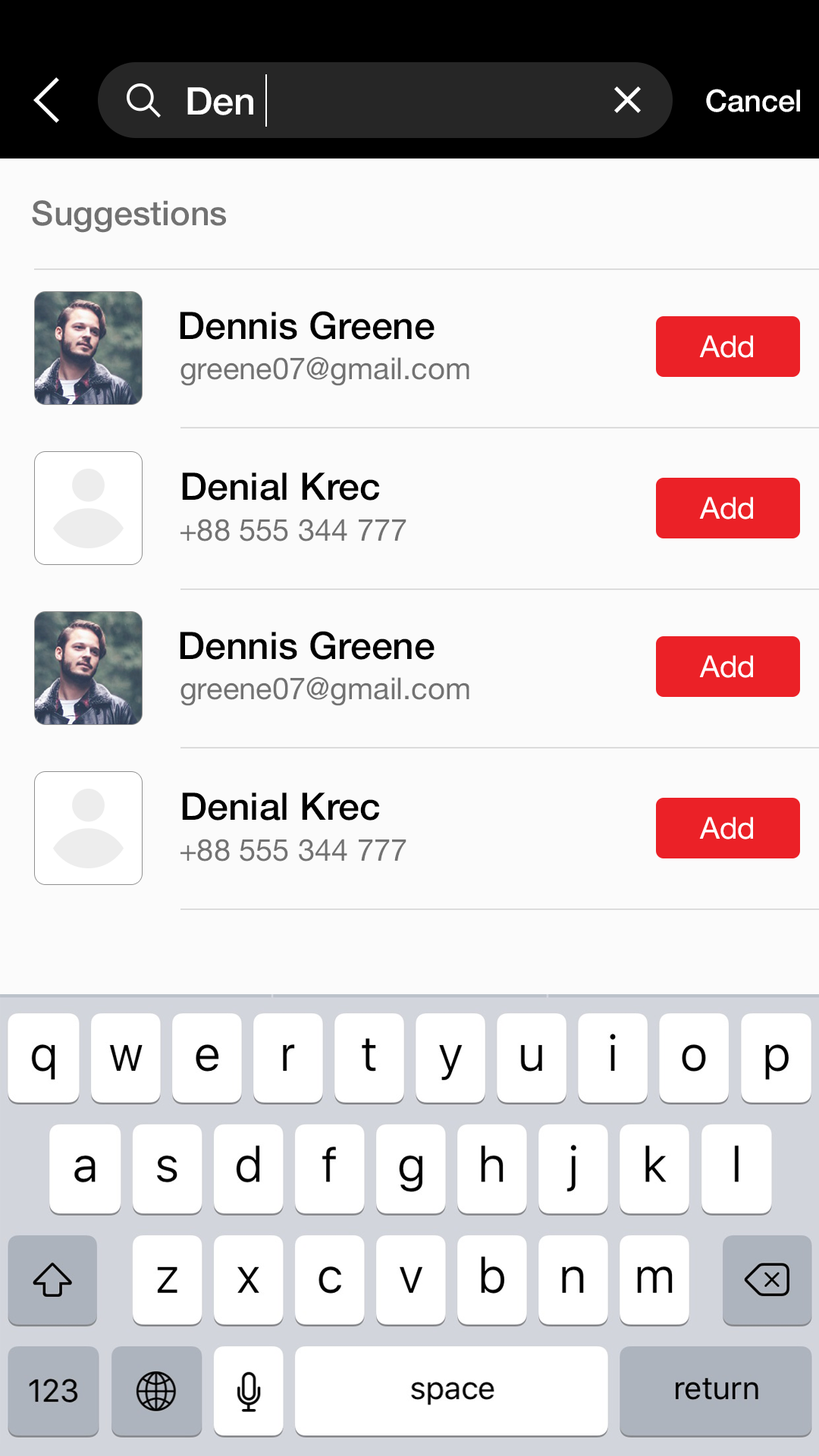
<style>
.page{position:relative;width:819px;height:1456px;background:#fbfbfb}
.page>*{position:absolute;margin:0}
.t1{font:37.9px "HelveticaNeue-Medium";color:#ffffff}
.t2{font:30.4px "HelveticaNeue-Medium";color:#ffffff}
.t3{font:34.1px "HelveticaNeue-Medium";color:#727272}
.t4{font:37.9px "HelveticaNeue-Medium";color:#000000}
.t5{font:30.3px "HelveticaNeue";color:#ffffff}
.t6{font:30.3px "HelveticaNeue";color:#727272}
</style>
<div class="page">
<p class="t1" style="left:187px;top:87px;width:66px;height:28px">Den</p>
<p class="t2" style="left:706px;top:89px;width:94px;height:23px">Cancel</p>
<p class="t3" style="left:32px;top:200px;width:194px;height:33px">Suggestions</p>
<p class="t4" style="left:180px;top:311px;width:255px;height:29px">Dennis Greene</p>
<p class="t5" style="left:699px;top:335px;width:54px;height:23px">Add</p>
<p class="t6" style="left:180px;top:356px;width:289px;height:30px">greene07@gmail.com</p>
<p class="t4" style="left:182px;top:472px;width:198px;height:28px">Denial Krec</p>
<p class="t5" style="left:699px;top:497px;width:54px;height:22px">Add</p>
<p class="t6" style="left:180px;top:519px;width:226px;height:22px">+88 555 344 777</p>
<p class="t4" style="left:180px;top:631px;width:255px;height:29px">Dennis Greene</p>
<p class="t5" style="left:699px;top:655px;width:54px;height:23px">Add</p>
<p class="t6" style="left:180px;top:676px;width:289px;height:30px">greene07@gmail.com</p>
<p class="t4" style="left:182px;top:792px;width:198px;height:29px">Denial Krec</p>
<p class="t5" style="left:699px;top:817px;width:54px;height:22px">Add</p>
<p class="t6" style="left:180px;top:839px;width:226px;height:22px">+88 555 344 777</p>
</div>
